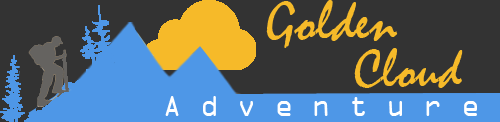
<style>
.page{position:relative;width:500px;height:122px;background:#333333}
.page>*{position:absolute;margin:0}
.t1{font:58.3px "Mistral";color:#f6ba29}
.t2{font:56.3px "Mistral";color:#f6ba29}
.t3{font:30.9px "OCRAExtended";color:#ffffff}
</style>
<div class="page">
<p class="t1" style="left:266px;top:0px;width:132px;height:48px">Golden</p>
<p class="t2" style="left:354px;top:48px;width:109px;height:40px">Cloud</p>
<p class="t3" style="left:165px;top:96px;width:312px;height:20px">A d v e n t u r e</p>
</div>
